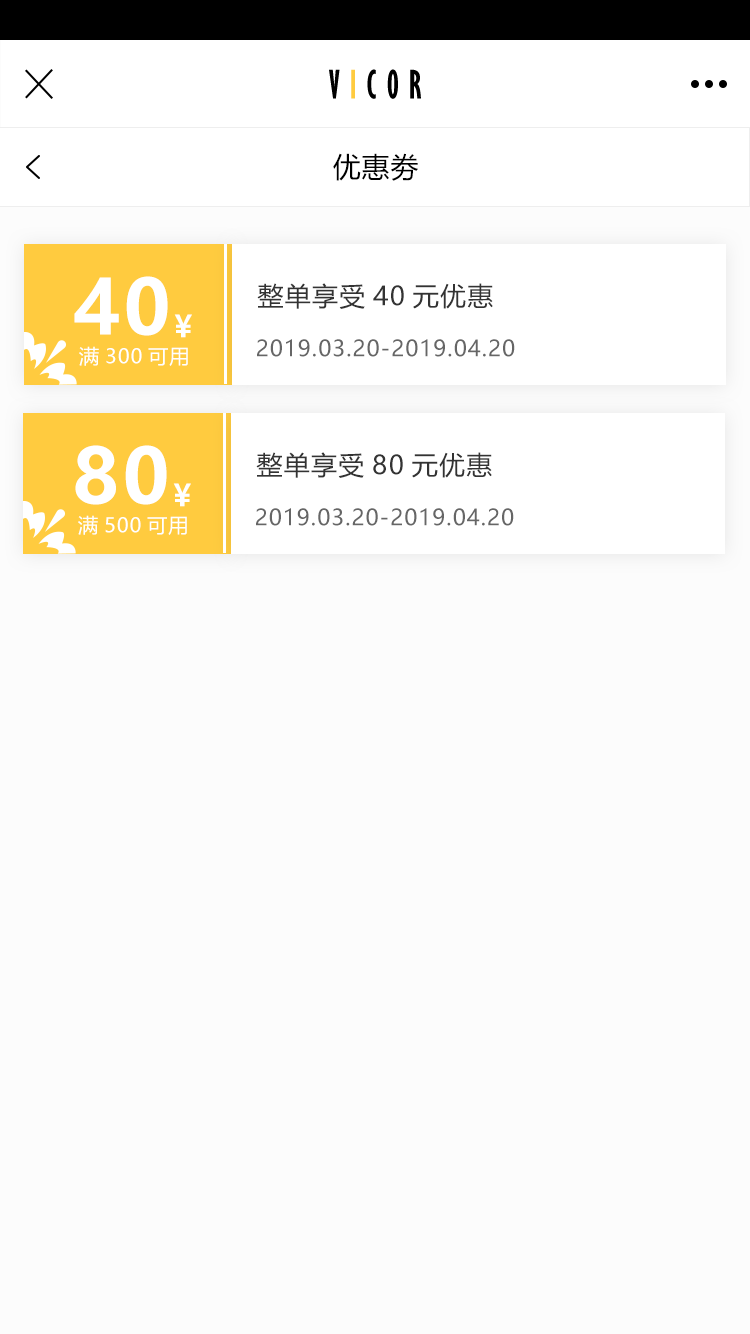
<style>
.page{position:relative;width:750px;height:1334px;background:#fcfcfc}
.page>*{position:absolute;margin:0}
.t1{font:36px "GillSansMT-ExtraCondensedBold";letter-spacing:0.3em;color:#000000;text-transform:uppercase}
.t2{font:36px "GillSansMT-ExtraCondensedBold";letter-spacing:0.3em;color:#ffcb3f;text-transform:uppercase}
.t3{font:28px "MicrosoftYaHei";letter-spacing:0.03em;color:#000000;text-transform:uppercase}
.t4{font:75.5px "MicrosoftYaHei-Bold";letter-spacing:0.05em;color:#ffffff;text-transform:uppercase}
.t5{font:26px "MicrosoftYaHei";letter-spacing:0.05em;color:#333333;text-transform:uppercase}
.t6{font:30px "MicrosoftYaHei-Bold";letter-spacing:0.05em;color:#ffffff;text-transform:uppercase}
.t7{font:22px "MicrosoftYaHei";letter-spacing:0.05em;color:#666666;text-transform:uppercase}
.t8{font:20px "MicrosoftYaHei";letter-spacing:0.05em;color:#ffffff;text-transform:uppercase}
</style>
<div class="page">
<p class="t1" style="left:329px;top:69px;width:92px;height:30px">v<span class="t2">i</span>cor</p>
<p class="t3" style="left:333px;top:153px;width:85px;height:28px">优惠劵</p>
<p class="t4" style="left:74px;top:276px;width:94px;height:60px">40</p>
<p class="t5" style="left:257px;top:283px;width:236px;height:26px">整单享受40元优惠</p>
<p class="t6" style="left:174px;top:314px;width:18px;height:24px">¥</p>
<p class="t7" style="left:257px;top:339px;width:258px;height:18px">2019.03.20-2019.04.20</p>
<p class="t8" style="left:79px;top:346px;width:109px;height:20px">满300可用</p>
<p class="t4" style="left:75px;top:445px;width:92px;height:60px">80</p>
<p class="t5" style="left:256px;top:452px;width:236px;height:26px">整单享受80元优惠</p>
<p class="t6" style="left:173px;top:483px;width:18px;height:24px">¥</p>
<p class="t7" style="left:256px;top:508px;width:258px;height:18px">2019.03.20-2019.04.20</p>
<p class="t8" style="left:78px;top:515px;width:109px;height:20px">满500可用</p>
</div>
